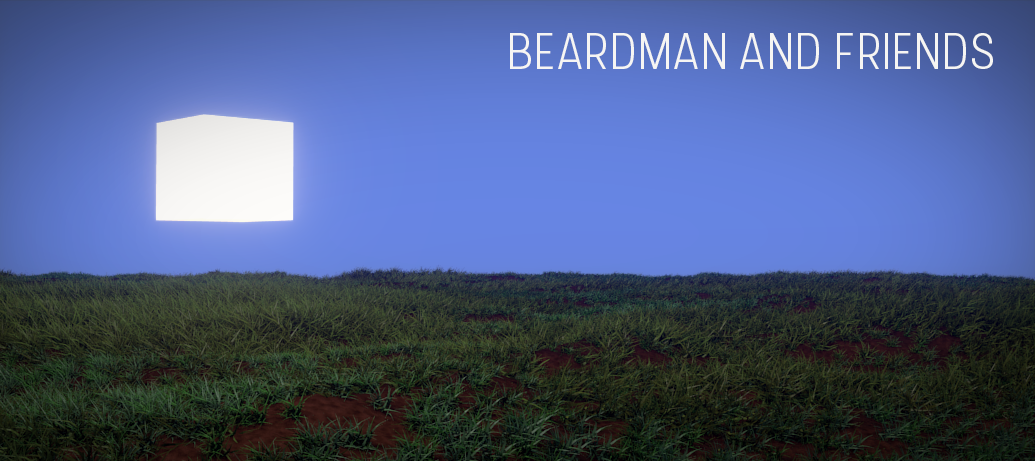
<style>
.page{position:relative;width:1035px;height:461px}
.page>*{position:absolute;margin:0}
.t1{font:50.7px "Stellar-Light";letter-spacing:-0.01em;color:#f6f5f3}
</style>
<div class="page">
<p class="t1" style="left:510px;top:33px;width:483px;height:36px">BEARDMAN AND FRIENDS</p>
</div>
